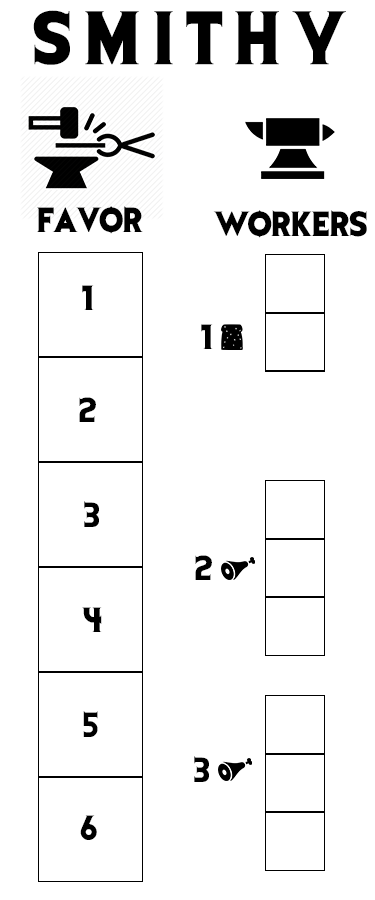
<style>
.page{position:relative;width:375px;height:900px;background:#ffffff}
.page>*{position:absolute;margin:0}
.t1{font:62.5px "EvilDead";letter-spacing:0.2em;color:#000000}
.t2{font:29.2px "EvilDead";color:#000000}
</style>
<div class="page">
<p class="t1" style="left:33px;top:10px;width:313px;height:55px">SMITHY</p>
<p class="t2" style="left:37px;top:206px;width:106px;height:28px">FAVOR</p>
<p class="t2" style="left:213px;top:210px;width:154px;height:28px">WORKERS</p>
<p class="t2" style="left:82px;top:285px;width:12px;height:25px">1</p>
<p class="t2" style="left:201px;top:324px;width:12px;height:25px">1</p>
<p class="t2" style="left:79px;top:397px;width:17px;height:25px">2</p>
<p class="t2" style="left:84px;top:501px;width:15px;height:26px">3</p>
<p class="t2" style="left:195px;top:555px;width:17px;height:25px">2</p>
<p class="t2" style="left:82px;top:607px;width:20px;height:25px">4</p>
<p class="t2" style="left:83px;top:711px;width:15px;height:26px">5</p>
<p class="t2" style="left:194px;top:756px;width:15px;height:26px">3</p>
<p class="t2" style="left:80px;top:815px;width:17px;height:25px">6</p>
</div>
